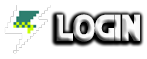
<style>
.page{position:relative;width:147px;height:59px;background:#ffffff}
.page>*{position:absolute;margin:0}
.t1{font:37.2px "StarJedi";scale:0.72 1}
</style>
<div class="page">
<p class="t1" style="left:56px;top:14px;width:84px;height:28px">login</p>
</div>
